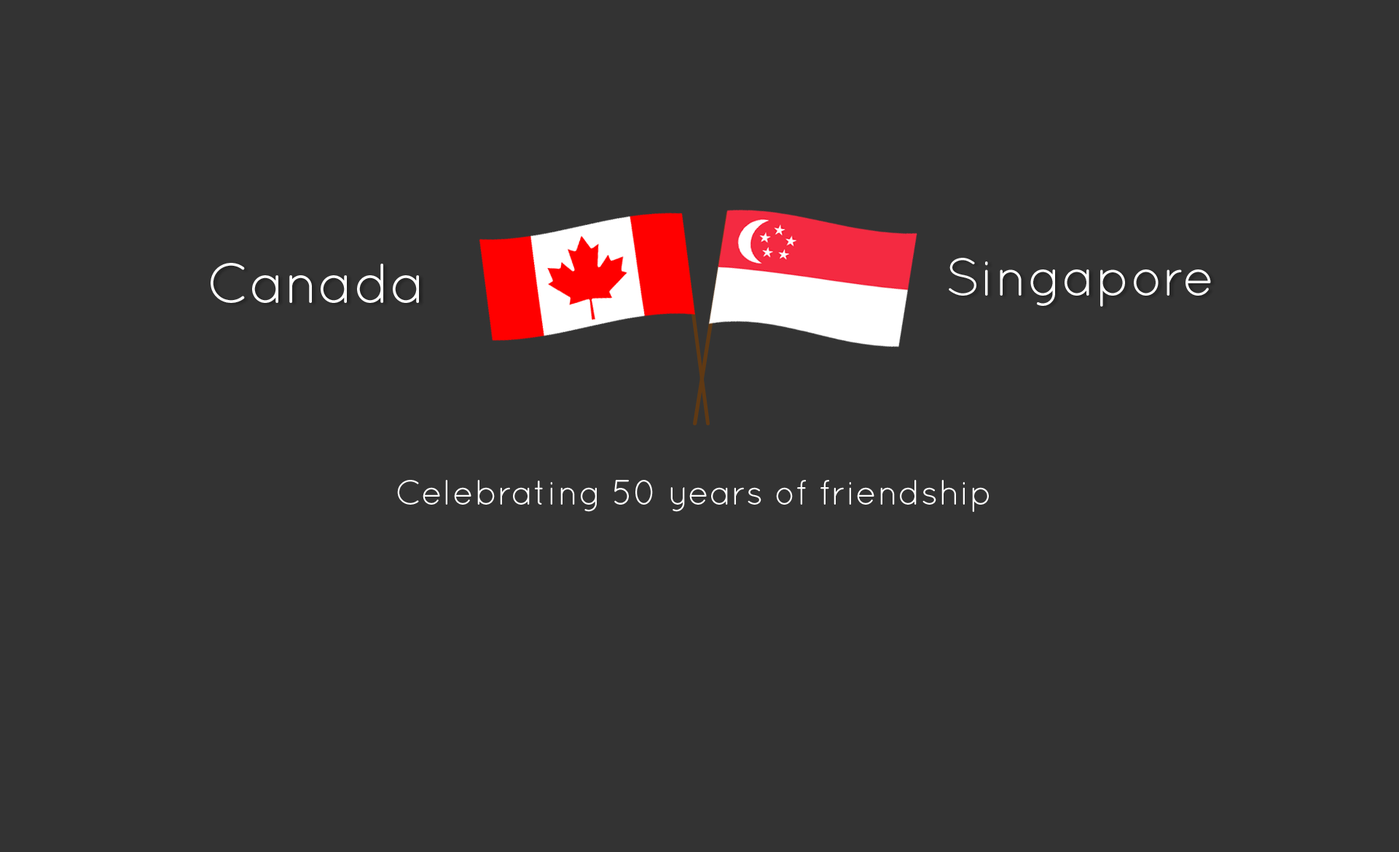
<style>
.page{position:relative;width:1399px;height:852px;background:#333333}
.page>*{position:absolute;margin:0}
.t1{font:53.2px "Quicksand-Regular";color:#ffffff}
.t2{font:56.6px "Quicksand-Regular";color:#ffffff}
.t3{font:35px "Quicksand-Regular";color:#ffffff}
</style>
<div class="page">
<p class="t1" style="left:949px;top:258px;width:262px;height:49px">Singapore</p>
<p class="t2" style="left:211px;top:263px;width:208px;height:40px">Canada</p>
<p class="t3" style="left:397px;top:480px;width:592px;height:32px">Celebrating 50 years of friendship</p>
</div>
